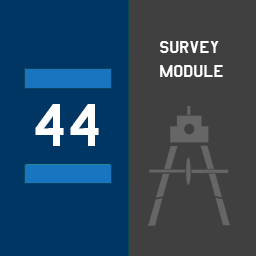
<style>
.page{position:relative;width:256px;height:256px;background:#404040}
.page>*{position:absolute;margin:0}
.t1{font:20.1px "AmarilloUSAF";color:#ffffff}
.t2{font:70px "AmarilloUSAF";color:#ffffff}
</style>
<div class="page">
<p class="t1" style="left:160px;top:41px;width:63px;height:36px">survey<br>module</p>
<p class="t2" style="left:35px;top:104px;width:64px;height:42px">44</p>
</div>
